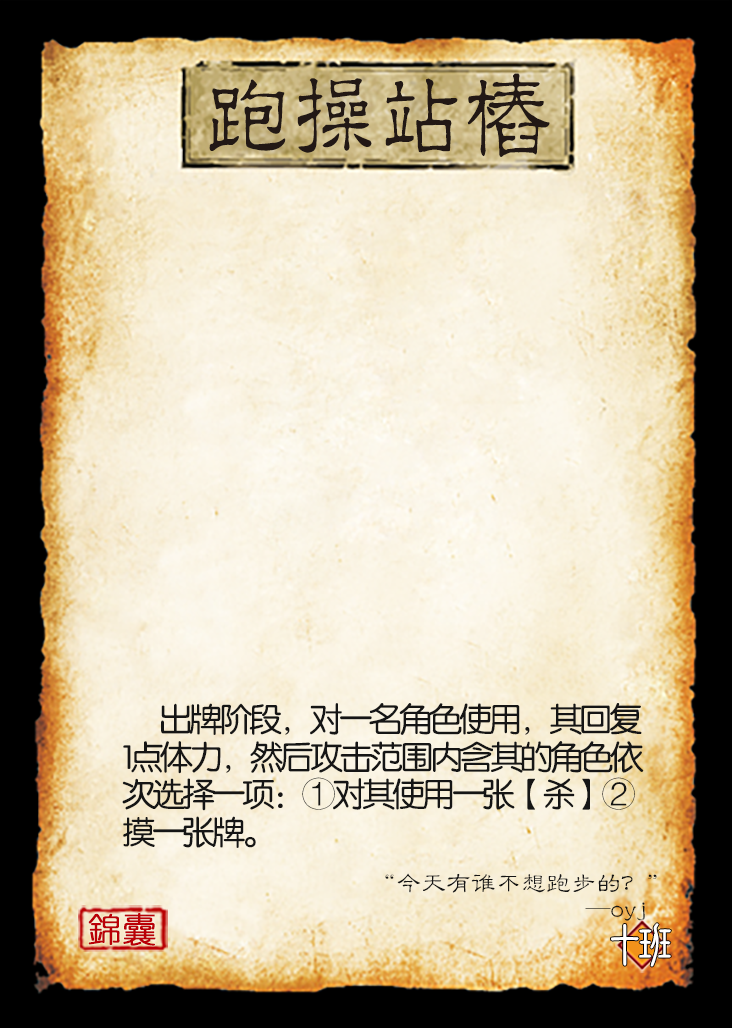
<style>
.page{position:relative;width:732px;height:1028px}
.page>*{position:absolute;margin:0}
.t1{font:91.7px "JMFLS_GBK";color:#221815;scale:0.95 1}
.t2{font:33.3px/37.5px "FZY3JW--GB1-0";letter-spacing:-0.1em;color:#151515}
.t3{font:25px/25px "FZLBJW--GB1-0";color:#151515}
.t4{font:33.3px "YouYuan";color:#ba0007;font-weight:bold}
.t5{font:50px "DFNewChuan-W5-WINP-BF";letter-spacing:-0.4em;color:#ffffff}
</style>
<div class="page">
<p class="t1" style="left:209px;top:73px;width:341px;height:84px">跑操站樁</p>
<p class="t2" style="left:122px;top:703px;width:522px;height:145px">出牌阶段，对一名角色使用，其回复1点体力，然后攻击范围内含其的角色依次选择一项：①对其使用一张【杀】②摸一张牌。</p>
<p class="t3" style="left:385px;top:873px;width:272px;height:48px;text-align:right">“今天有谁不想跑步的？”<br>                           —oyj</p>
<p class="t4" style="left:88px;top:913px;width:68px;height:33px">錦囊</p>
<p class="t5" style="left:611px;top:923px;width:60px;height:44px">十班</p>
</div>
